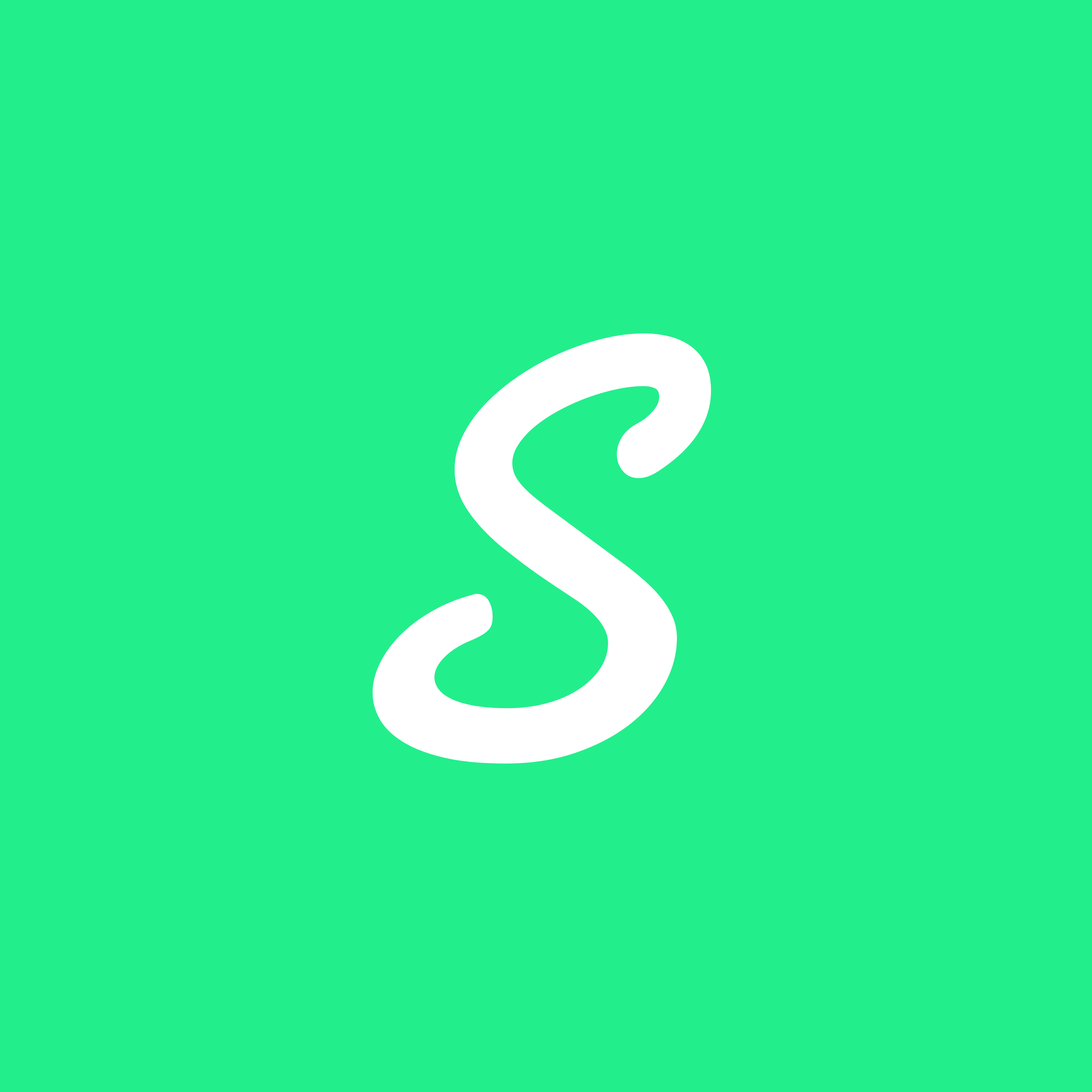
<style>
.page{position:relative;width:1092px;height:1092px;background:#23ee8c}
.page>*{position:absolute;margin:0}
.t1{font:601.8px "Damion";letter-spacing:0.1em;color:#ffffff}
</style>
<div class="page">
<p class="t1" style="left:372px;top:333px;width:339px;height:431px">S</p>
</div>
